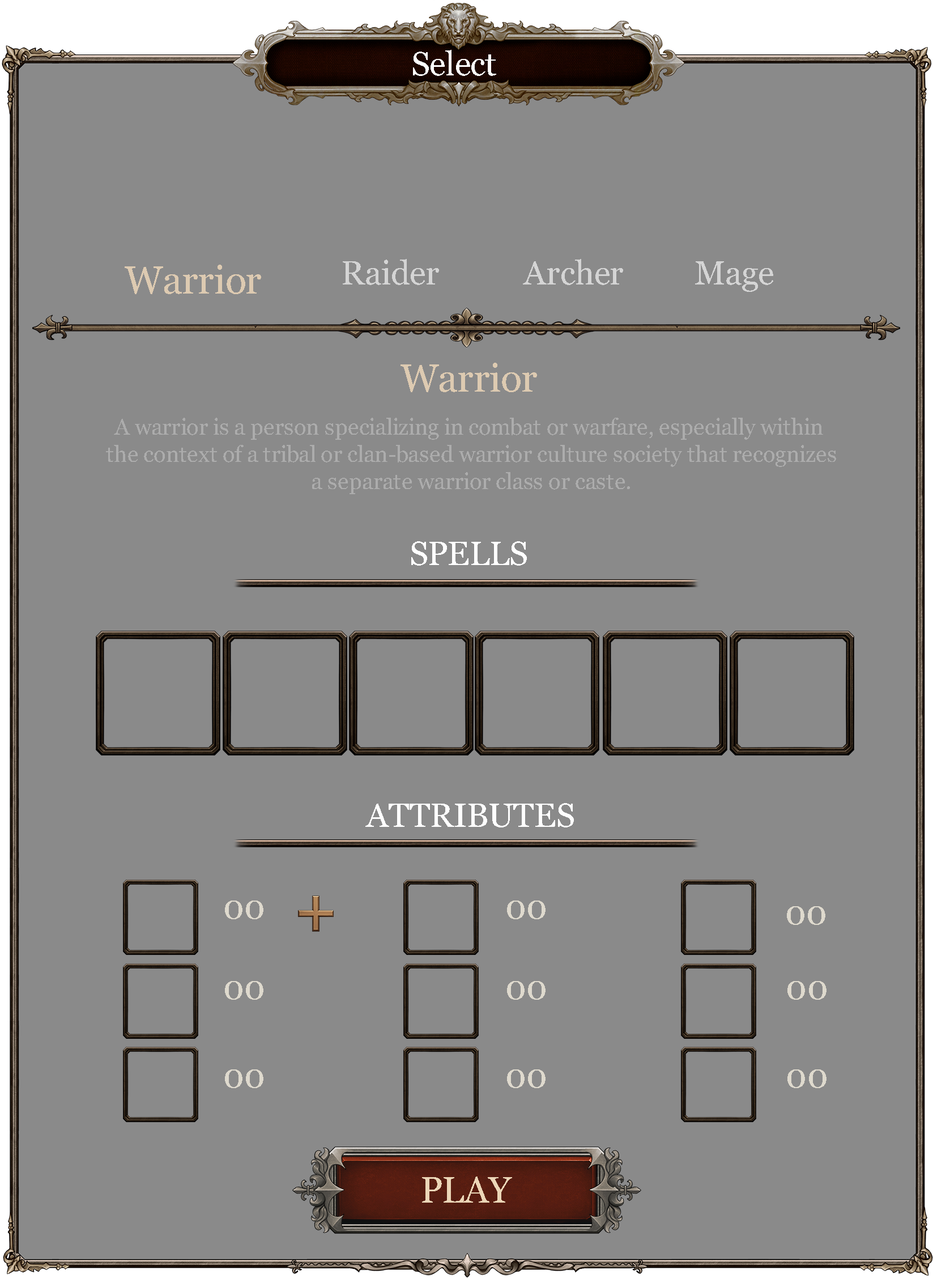
<style>
.page{position:relative;width:933px;height:1278px;background:#8a8a8a}
.page>*{position:absolute;margin:0}
.t1{font:33.4px "Georgia";color:#ffffff}
.t2{font:39.1px "Georgia";color:#ddcab1}
.t3{font:33.4px "Georgia";color:#d4d4d4}
.t4{font:22.8px "Georgia";color:#acacac}
.t5{font:33.7px "Georgia";color:#ded9cd}
.t6{font:36.6px "Georgia";color:#ebd6b7}
</style>
<div class="page">
<p class="t1" style="left:413px;top:50px;width:83px;height:26px">Select</p>
<p class="t2" style="left:125px;top:265px;width:136px;height:29px">Warrior</p>
<p class="t3" style="left:343px;top:259px;width:96px;height:26px">Raider</p>
<p class="t3" style="left:523px;top:259px;width:100px;height:26px">Archer</p>
<p class="t3" style="left:695px;top:261px;width:78px;height:31px">Mage</p>
<p class="t2" style="left:401px;top:363px;width:136px;height:29px">Warrior</p>
<p class="t4" style="left:106px;top:418px;width:730px;height:76px;text-align:center">A warrior is a person specializing in combat or warfare, especially within<br> the context of a tribal or clan-based warrior culture society that recognizes<br> a separate warrior class or caste.</p>
<p class="t1" style="left:411px;top:541px;width:116px;height:24px">SPELLS</p>
<p class="t1" style="left:365px;top:803px;width:209px;height:24px">ATTRIBUTES</p>
<p class="t5" style="left:225px;top:900px;width:38px;height:19px">00</p>
<p class="t5" style="left:507px;top:900px;width:39px;height:19px">00</p>
<p class="t5" style="left:787px;top:906px;width:39px;height:19px">00</p>
<p class="t5" style="left:225px;top:981px;width:38px;height:19px">00</p>
<p class="t5" style="left:507px;top:981px;width:39px;height:19px">00</p>
<p class="t5" style="left:788px;top:981px;width:39px;height:19px">00</p>
<p class="t5" style="left:225px;top:1069px;width:38px;height:19px">00</p>
<p class="t5" style="left:507px;top:1069px;width:39px;height:19px">00</p>
<p class="t5" style="left:788px;top:1069px;width:39px;height:19px">00</p>
<p class="t6" style="left:422px;top:1176px;width:90px;height:26px">PLAY</p>
</div>
